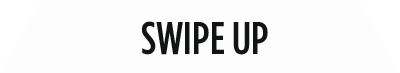
<style>
.page{position:relative;width:400px;height:73px;background:#fdfdfd}
.page>*{position:absolute;margin:0}
.t1{font:45.8px "GothamCondensed-Medium";color:#121414}
</style>
<div class="page">
<p class="t1" style="left:141px;top:21px;width:127px;height:34px">SWIPE UP</p>
</div>
